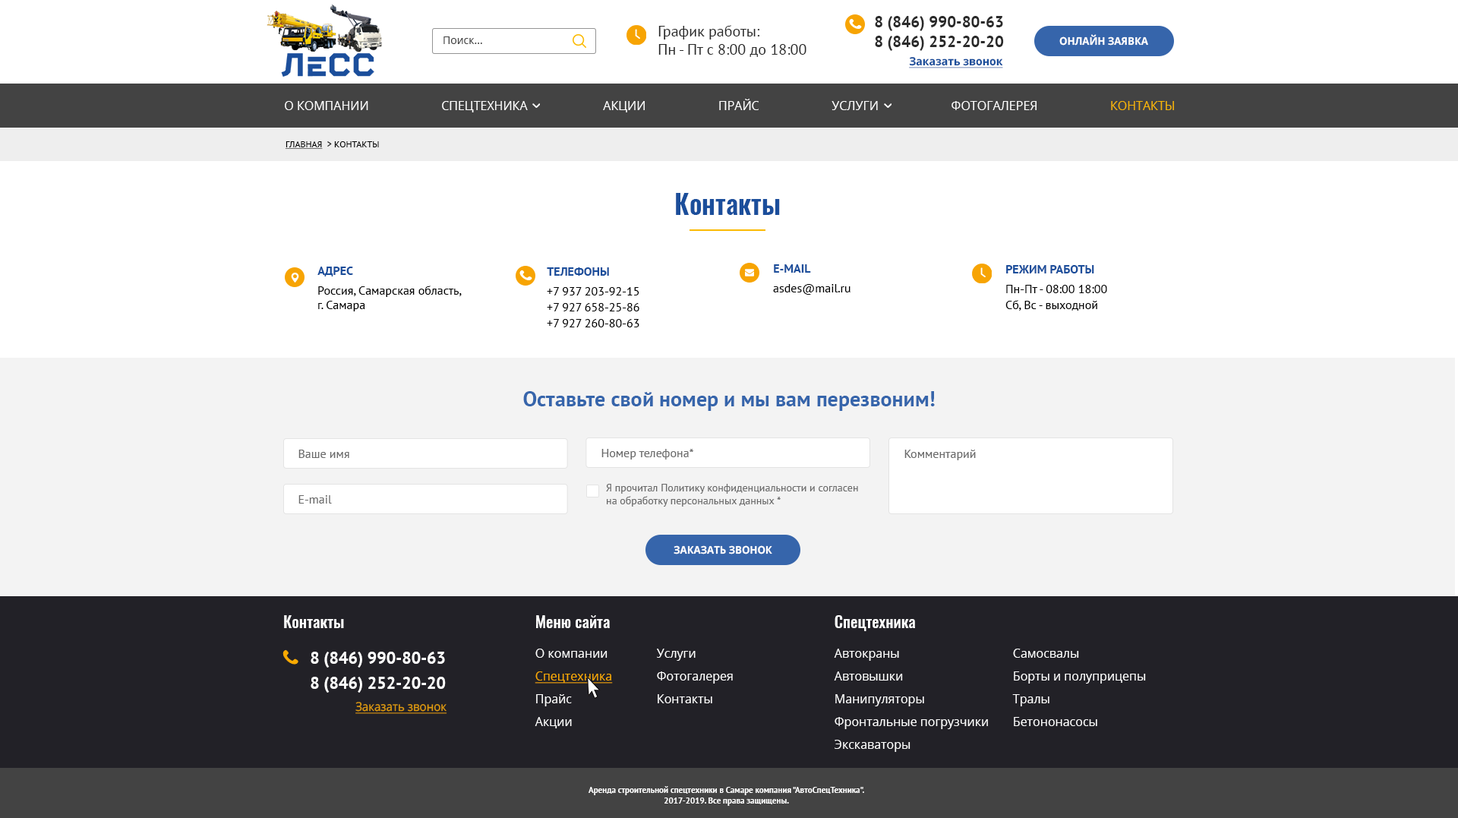
<style>
.page{position:relative;width:1458px;height:818px;background:#ffffff}
.page>*{position:absolute;margin:0}
.t1{font:15.9px/19.7px "PTSans-Bold";color:#2a2a2a}
.t2{font:15.2px "PTSans-Regular";color:#2a2a2a}
.t3{font:10.6px "OpenSans";color:#434343}
.t4{font:10.6px "OpenSans-Bold";color:#ffffff;text-transform:uppercase;scale:0.94 1}
.t5{font:11.4px "OpenSans-Bold";color:#1b4e9b;text-decoration:underline;scale:0.94 1}
.t6{font:12.2px "OpenSans";color:#ffffff;text-transform:uppercase}
.t7{font:12.2px "OpenSans";color:#f7b503;text-transform:uppercase}
.t8{font:9.1px "PTSans-Regular";color:#000000;text-transform:uppercase}
.t9{font:9.1px "PTSans-Regular";color:#000000;text-transform:uppercase;text-decoration:underline}
.t10{font:26.6px "Oswald-DemiBold";color:#1b4e9b}
.t11{font:12.2px "PTSans-Bold";color:#1b4e9b;text-transform:uppercase}
.t12{font:12.2px "PTSans-Regular";color:#000000}
.t13{font:12.2px/15.9px "PTSans-Regular";color:#000000}
.t14{font:21.3px "PTSans-Bold";color:#3665ab}
.t15{font:12.2px "PTSans-Regular";color:#6b6b6b}
.t16{font:10.6px "PTSans-Regular";color:#6b6b6b}
.t17{font:15.9px "Oswald-Medium";color:#ffffff}
.t18{font:16.7px/24.4px "PTSans-Bold";color:#ffffff}
.t19{font:12.2px/22.8px "OpenSans";color:#ffffff}
.t20{font:12.2px/22.8px "OpenSans";color:#f9aa02;text-decoration:underline}
.t21{font:12.2px "OpenSans";color:#df9b0b;text-decoration:underline;scale:0.94 1}
.t22{font:8.4px "PTSans-Bold";color:#ffffff}
</style>
<div class="page">
<p class="t1" style="left:875px;top:16px;width:129px;height:35px">8 (846) 990-80-63<br>8 (846) 252-20-20</p>
<p class="t2" style="left:658px;top:25px;width:148px;height:32px">График работы:<br>Пн - Пт с 8:00 до 18:00</p>
<p class="t3" style="left:443px;top:36px;width:39px;height:8px">Поиск...</p>
<p class="t4" style="left:1059px;top:34px;width:89px;height:12px">онлайн заявка</p>
<p class="t5" style="left:909px;top:57px;width:94px;height:11px">Заказать звонок</p>
<p class="t6" style="left:285px;top:99px;width:889px;height:13px">О компании                       Спецтехника                        АКЦИИ                       Прайс                       Услуги                       Фотогалерея                       <span class="t7">Контакты</span></p>
<p class="t8" style="left:285px;top:141px;width:94px;height:8px"><span class="t9">Главная</span>  &gt; Контакты</p>
<p class="t10" style="left:676px;top:193px;width:104px;height:22px">Контакты</p>
<p class="t11" style="left:317px;top:267px;width:36px;height:9px">Адрес</p>
<p class="t11" style="left:547px;top:267px;width:62px;height:9px">Телефоны</p>
<p class="t11" style="left:774px;top:264px;width:37px;height:9px">E-mail</p>
<p class="t11" style="left:1006px;top:265px;width:88px;height:8px">Режим работы</p>
<p class="t12" style="left:318px;top:286px;width:144px;height:25px">Россия, Самарская область, <br>г. Самара</p>
<p class="t13" style="left:547px;top:287px;width:92px;height:40px">+7 937 203-92-15<br>+7 927 658-25-86<br>+7 927 260-80-63</p>
<p class="t12" style="left:773px;top:284px;width:78px;height:11px">asdes@mail.ru</p>
<p class="t13" style="left:1005px;top:285px;width:102px;height:26px">Пн-Пт - 08:00 18:00<br>Сб, Вс - выходной</p>
<p class="t14" style="left:523px;top:391px;width:412px;height:20px">Оставьте свой номер и мы вам перезвоним!</p>
<p class="t15" style="left:298px;top:450px;width:51px;height:8px">Ваше имя</p>
<p class="t15" style="left:601px;top:449px;width:92px;height:10px">Номер телефона*</p>
<p class="t15" style="left:904px;top:450px;width:72px;height:10px">Комментарий</p>
<p class="t16" style="left:606px;top:484px;width:252px;height:23px">Я прочитал Политику конфиденциальности и согласен <br>на обработку персональных данных *</p>
<p class="t15" style="left:298px;top:495px;width:34px;height:8px">E-mail</p>
<p class="t4" style="left:674px;top:545px;width:98px;height:9px">Заказать звонок</p>
<p class="t17" style="left:284px;top:615px;width:60px;height:13px">Контакты</p>
<p class="t17" style="left:536px;top:615px;width:74px;height:13px">Меню сайта</p>
<p class="t17" style="left:835px;top:615px;width:80px;height:16px">Спецтехника</p>
<p class="t18" style="left:311px;top:652px;width:135px;height:41px">8 (846) 990-80-63<br>8 (846) 252-20-20</p>
<p class="t19" style="left:535px;top:649px;width:78px;height:79px">О компании<br><span class="t20">Спецтехника<br></span>Прайс <br>Акции</p>
<p class="t19" style="left:657px;top:649px;width:76px;height:54px">Услуги<br>Фотогалерея<br>Контакты</p>
<p class="t19" style="left:834px;top:649px;width:154px;height:103px">Автокраны<br>Автовышки<br>Манипуляторы<br>Фронтальные погрузчики<br>Экскаваторы</p>
<p class="t19" style="left:1012px;top:649px;width:134px;height:77px">Самосвалы<br>Борты и полуприцепы<br>Тралы<br>Бетононасосы</p>
<p class="t21" style="left:355px;top:702px;width:92px;height:12px">Заказать звонок</p>
<p class="t22" style="left:589px;top:786px;width:275px;height:20px;text-align:center">Аренда строительной спецтехники в Самаре компания "АвтоСпецТехника".<br>2017-2019. Все права защищены.</p>
</div>
